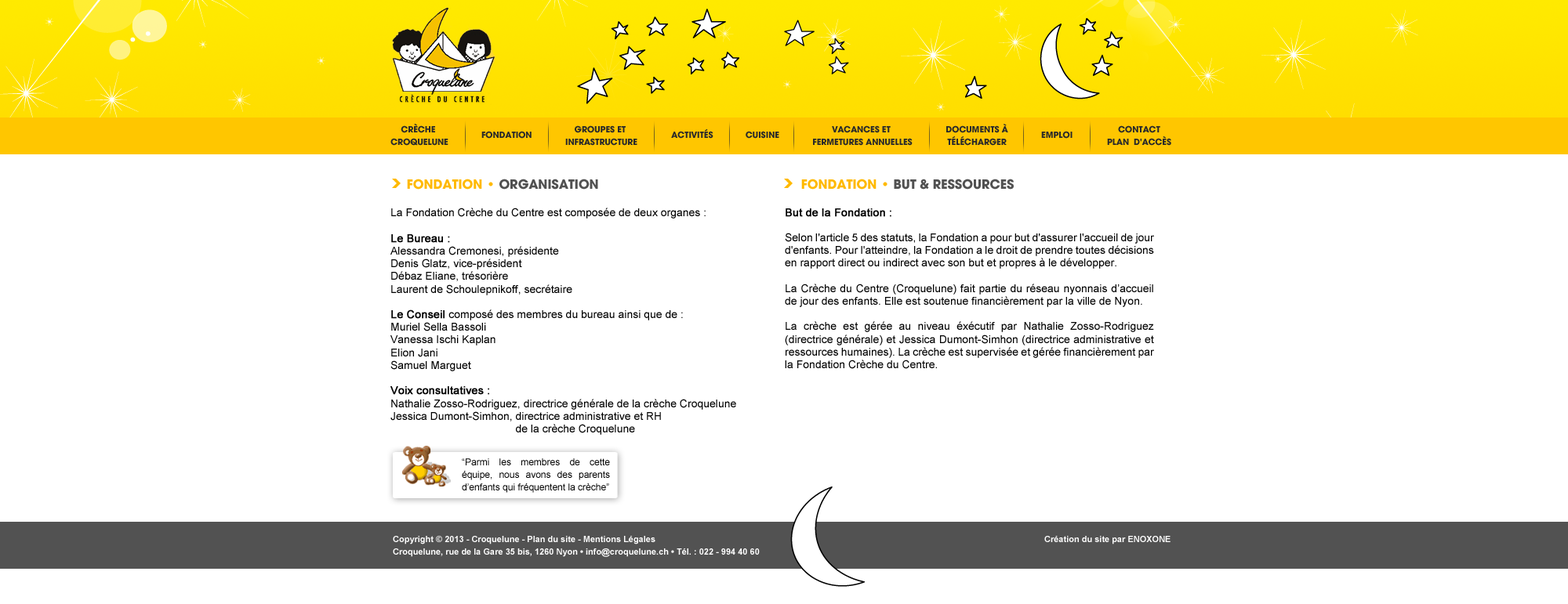
<style>
.page{position:relative;width:1568px;height:604px;background:#ffffff}
.page>*{position:absolute;margin:0}
.t1{font:9.4px/12.7px "AvantGard-Bold";color:#2a2a2a;text-transform:uppercase}
.t2{font:9.4px "AvantGard-Bold";color:#2a2a2a;text-transform:uppercase}
.t3{font:14.1px "AvantGard-Bold";color:#515151;text-transform:uppercase}
.t4{font:14.1px "AvantGard-Bold";color:#ffb900;text-transform:uppercase}
.t5{font:11px/12.7px "ArialMT";color:#000000}
.t6{font:11px/12.7px "ArialMT";color:#000000;font-weight:bold}
.t7{font:9.4px/12.7px "ArialMT";color:#000000}
.t8{font:8.6px/12.7px "Arial-BoldMT";color:#ffffff}
</style>
<div class="page">
<p class="t1" style="left:390px;top:123px;width:58px;height:23px;text-align:center">Crèche <br>Croquelune</p>
<p class="t1" style="left:565px;top:125px;width:72px;height:21px;text-align:center">Groupes et <br>infrastructure</p>
<p class="t1" style="left:813px;top:125px;width:100px;height:21px;text-align:center">Vacances et <br>fermetures annuelles</p>
<p class="t1" style="left:946px;top:124px;width:62px;height:22px;text-align:center">DOCUMENTs à<br>télécharger</p>
<p class="t1" style="left:1107px;top:125px;width:64px;height:21px;text-align:center">Contact<br>Plan  d'accès</p>
<p class="t2" style="left:481px;top:131px;width:51px;height:8px">Fondation</p>
<p class="t2" style="left:671px;top:129px;width:42px;height:10px">ACTIVITés</p>
<p class="t2" style="left:746px;top:131px;width:33px;height:8px">Cuisine</p>
<p class="t2" style="left:1041px;top:131px;width:32px;height:8px">Emploi</p>
<p class="t3" style="left:407px;top:179px;width:191px;height:11px"><span class="t4">FONDATION • </span>ORGANISATION</p>
<p class="t3" style="left:801px;top:179px;width:213px;height:11px"><span class="t4">FONDATION • </span>but &amp; ressources</p>
<p class="t5" style="left:390px;top:208px;width:346px;height:227px">La Fondation Crèche du Centre est composée de deux organes :<br><br><span class="t6">Le Bureau :<br></span>Alessandra Cremonesi, présidente<br>Denis Glatz, vice-président<br>Débaz Eliane, trésorière<br>Laurent de Schoulepnikoff, secrétaire<br><br><span class="t6">Le Conseil </span>composé des membres du bureau ainsi que de :<br>Muriel Sella Bassoli<br>Vanessa Ischi Kaplan<br>Elion Jani<br>Samuel Marguet<br><br><span class="t6">Voix consultatives :<br></span>Nathalie Zosso-Rodriguez, directrice générale de la crèche Croquelune<br>Jessica Dumont-Simhon, directrice administrative et RH<br>                                         de la crèche Croquelune</p>
<p class="t5" style="left:785px;top:209px;width:369px;height:160px;text-align:justify"><span class="t6">But de la Fondation :<br><br></span>Selon l'article 5 des statuts, la Fondation a pour but d'assurer l'accueil de jour d'enfants. Pour l'atteindre, la Fondation a le droit de prendre toutes décisions en rapport direct ou indirect avec son but et propres à le développer.<br><br>La Crèche du Centre (Croquelune) fait partie du réseau nyonnais d’accueil de jour des enfants. Elle est soutenue financièrement par la ville de Nyon. <br><br>La crèche est gérée au niveau éxécutif par Nathalie Zosso-Rodriguez (directrice générale) et Jessica Dumont-Simhon (directrice administrative et ressources humaines). La crèche est supervisée et gérée financièrement par la Fondation Crèche du Centre.</p>
<p class="t7" style="left:462px;top:459px;width:148px;height:34px;text-align:justify">“Parmi les membres de cette équipe, nous avons des parents d’enfants qui fréquentent la crèche”</p>
<p class="t8" style="left:393px;top:536px;width:778px;height:21px">Copyright © 2013 - Croquelune - Plan du site - Mentions Légales                                                             Création du site par ENOXONE<br>Croquelune, rue de la Gare 35 bis, 1260 Nyon • info@croquelune.ch • Tél. : 022 - 994 40 60</p>
</div>
